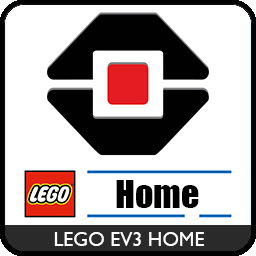
<style>
.page{position:relative;width:256px;height:256px;background:#ffffff}
.page>*{position:absolute;margin:0}
.t1{font:20px "GillSansMT";color:#ffffff}
</style>
<div class="page">
<p class="t1" style="left:54px;top:232px;width:150px;height:14px">LEGO EV3 HOME</p>
</div>
